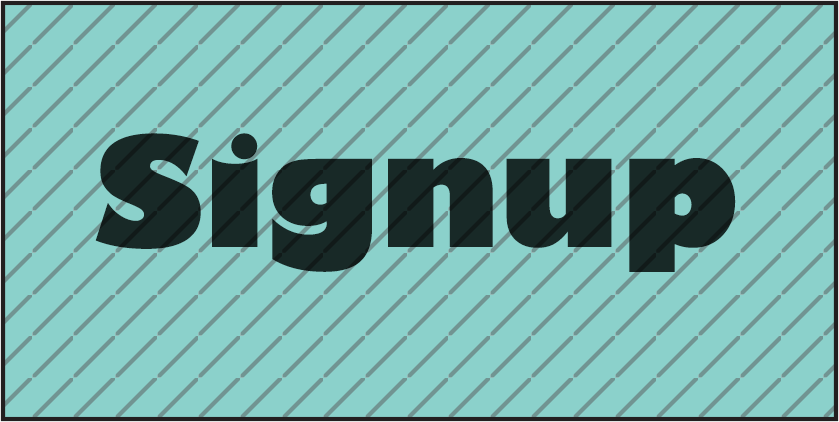
<style>
.page{position:relative;width:839px;height:422px;background:#8bd1cb}
.page>*{position:absolute;margin:0}
.t1{font:150px "GillSans-UltraBold";color:#182927}
</style>
<div class="page">
<p class="t1" style="left:95px;top:133px;width:641px;height:139px">Signup</p>
</div>
